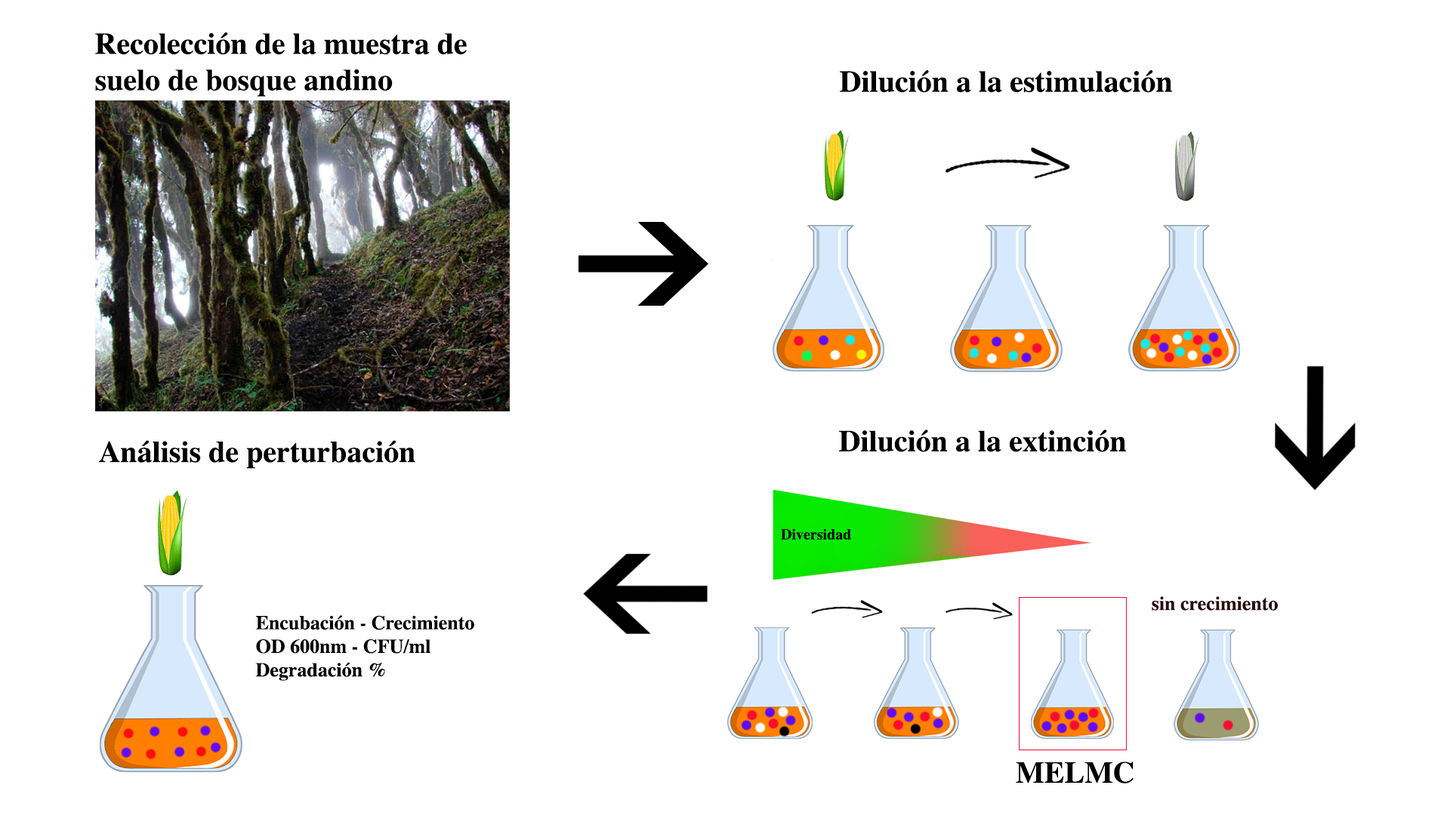
<style>
.page{position:relative;width:1450px;height:822px;background:#ffffff}
.page>*{position:absolute;margin:0}
.t1{font:30.2px "Times-Bold";color:#000000}
.t2{font:19.6px "Times-Bold";color:#280b10}
.t3{font:19.6px "Times-Bold";color:#000000}
</style>
<div class="page">
<p class="t1" style="left:95px;top:32px;width:372px;height:65px">Recolección de la muestra de <br>suelo de bosque andino</p>
<p class="t1" style="left:840px;top:70px;width:332px;height:23px">Dilución a la estimulación</p>
<p class="t1" style="left:839px;top:430px;width:287px;height:22px">Dilución a la extinción</p>
<p class="t1" style="left:99px;top:440px;width:316px;height:29px">Análisis de perturbación</p>
<p class="t2" style="left:1152px;top:597px;width:126px;height:14px">sin crecimiento</p>
<p class="t3" style="left:255px;top:615px;width:219px;height:66px">Encubación - Crecimiento<br>OD 600nm - CFU/ml <br>Degradación %</p>
<p class="t1" style="left:1016px;top:762px;width:118px;height:22px">MELMC</p>
</div>
